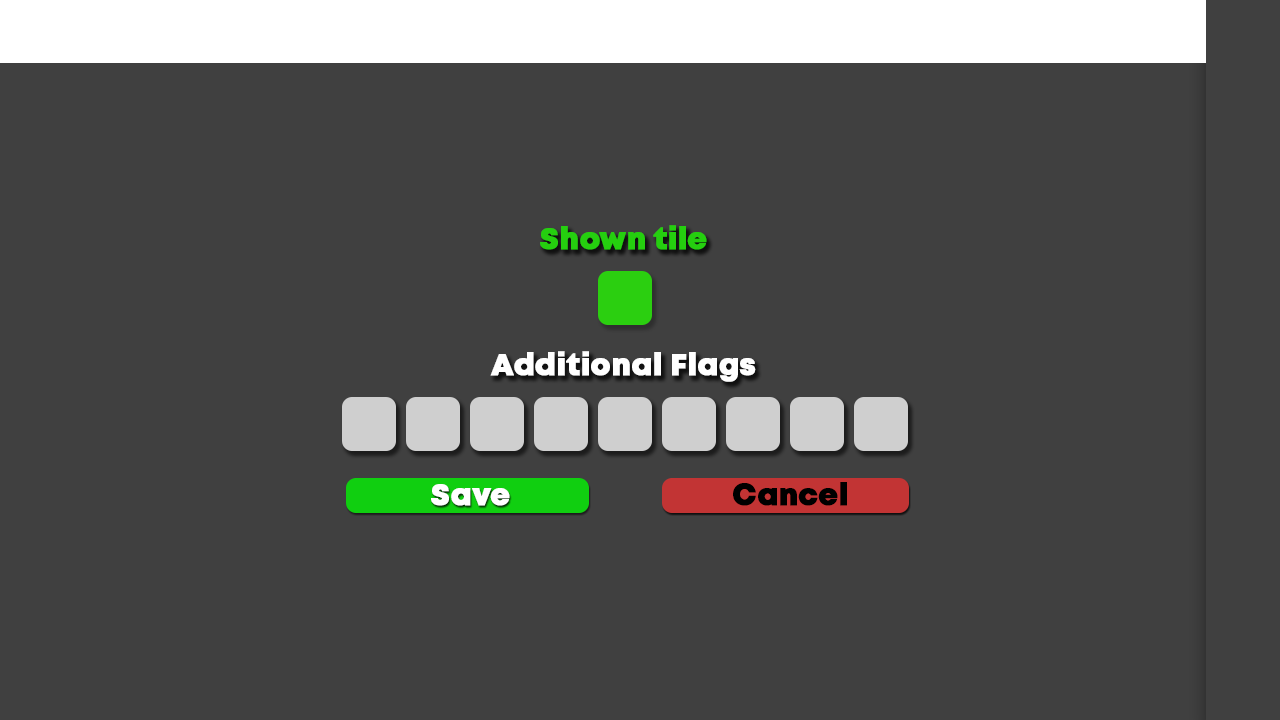
<style>
.page{position:relative;width:1280px;height:720px;background:#404040}
.page>*{position:absolute;margin:0}
.t1{font:30px "Mont-HeavyDEMO";color:#25cf0f;font-weight:bold}
.t2{font:30px "Mont-HeavyDEMO";color:#ffffff;font-weight:bold}
.t3{font:30px "Mont-HeavyDEMO";color:#000000;font-weight:bold}
</style>
<div class="page">
<p class="t1" style="left:540px;top:225px;width:167px;height:25px">Shown tile</p>
<p class="t2" style="left:490px;top:351px;width:266px;height:31px">Additional Flags</p>
<p class="t2" style="left:431px;top:484px;width:79px;height:22px">Save</p>
<p class="t3" style="left:733px;top:482px;width:114px;height:24px">Cancel</p>
</div>
